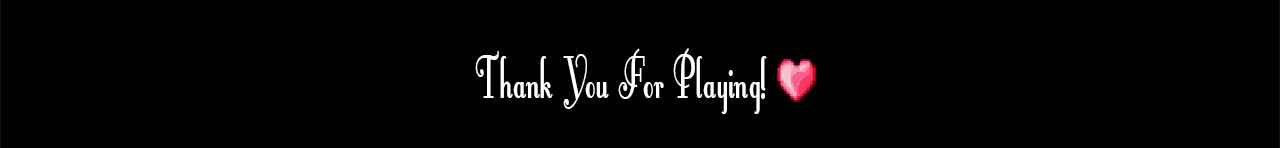
<style>
.page{position:relative;width:1280px;height:148px;background:#000000}
.page>*{position:absolute;margin:0}
.t1{font:72.4px "FontleroyBrownNF";color:#ffffff;scale:0.63 1}
</style>
<div class="page">
<p class="t1" style="left:475px;top:48px;width:292px;height:66px">Thank You For Playing!</p>
</div>
